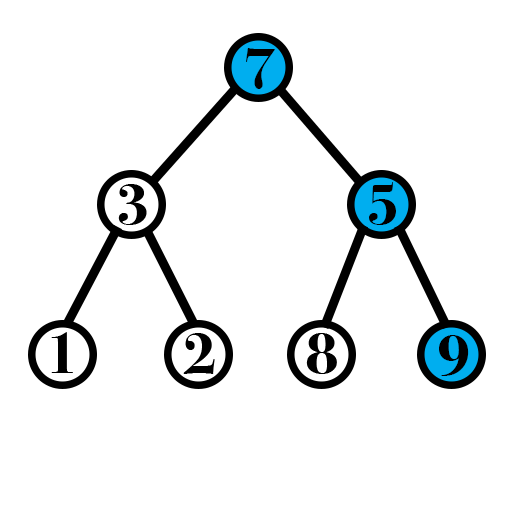
<style>
.page{position:relative;width:512px;height:512px;background:#ffffff}
.page>*{position:absolute;margin:0}
.t1{font:60px "BodoniSvtyTwoITCTT-Bold";color:#000000}
</style>
<div class="page">
<p class="t1" style="left:246px;top:48px;width:29px;height:41px">7</p>
<p class="t1" style="left:118px;top:184px;width:29px;height:41px">3</p>
<p class="t1" style="left:369px;top:182px;width:27px;height:43px">5</p>
<p class="t1" style="left:51px;top:332px;width:22px;height:41px">1</p>
<p class="t1" style="left:183px;top:333px;width:32px;height:41px">2</p>
<p class="t1" style="left:306px;top:333px;width:31px;height:41px">8</p>
<p class="t1" style="left:439px;top:335px;width:30px;height:41px">9</p>
</div>
